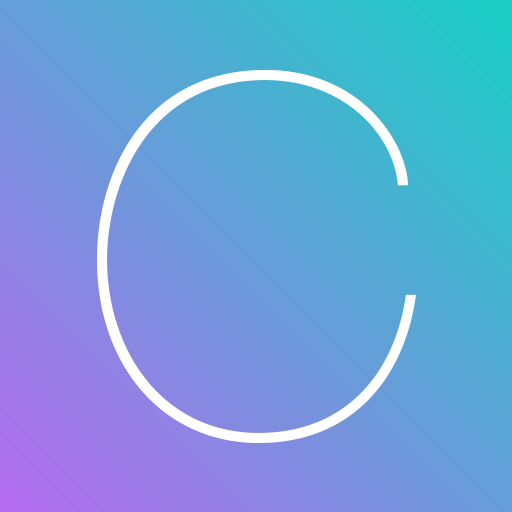
<style>
.page{position:relative;width:512px;height:512px}
.page>*{position:absolute;margin:0}
.t1{font:500px "HelveticaNeueLTStd-UltLt";color:#ffffff}
</style>
<div class="page">
<p class="t1" style="left:97px;top:70px;width:319px;height:373px">C</p>
</div>
